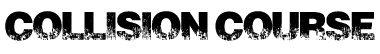
<style>
.page{position:relative;width:380px;height:54px;background:#ffffff}
.page>*{position:absolute;margin:0}
.t1{font:36.3px "ScorchedEarth";color:#000000}
</style>
<div class="page">
<p class="t1" style="left:5px;top:11px;width:370px;height:30px">Collision Course</p>
</div>
